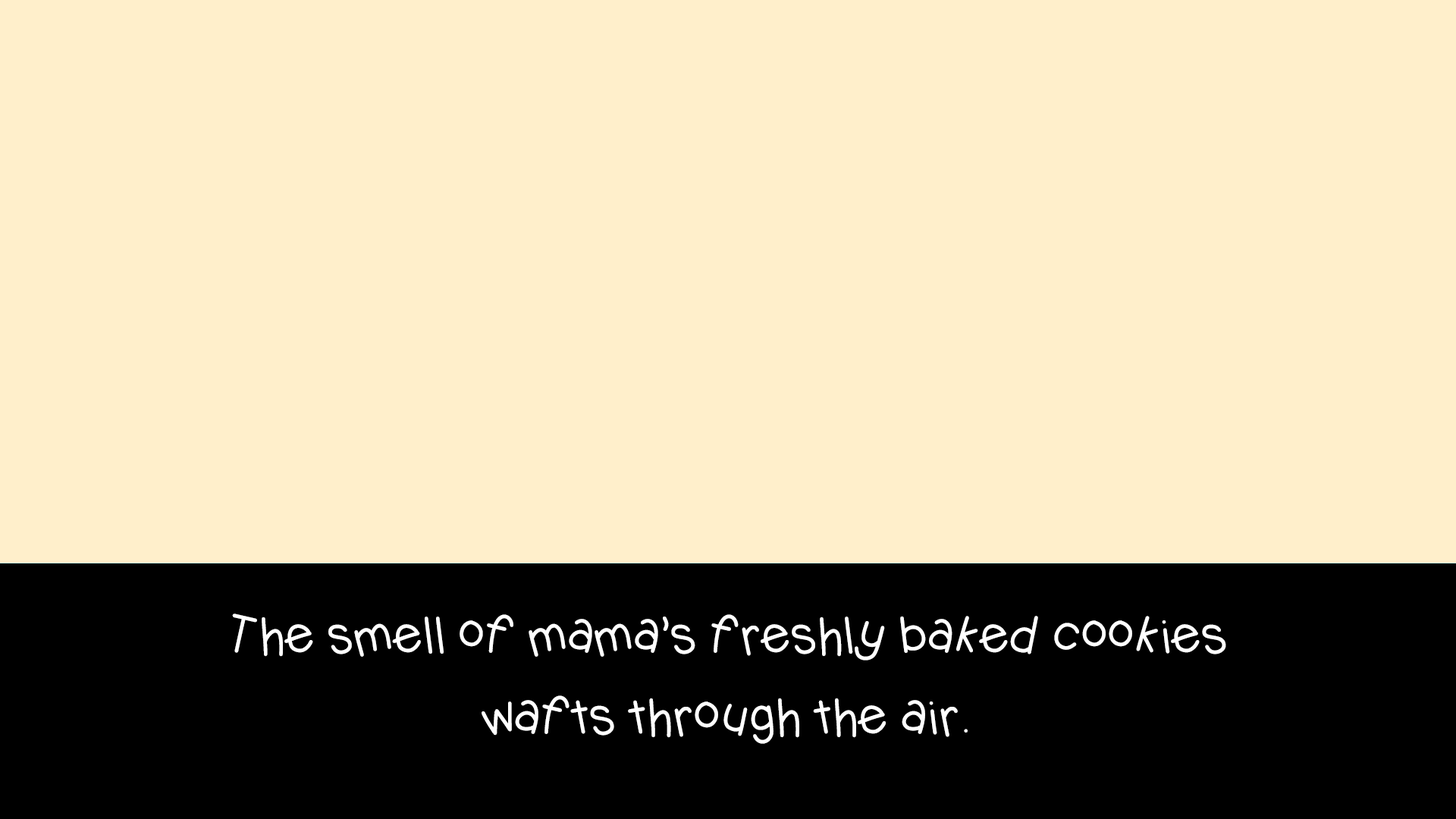
<style>
.page{position:relative;width:1456px;height:819px;background:#ffefcb}
.page>*{position:absolute;margin:0}
.t1{font:49.1px/81.1px "KBJellybean";letter-spacing:-0.04em;color:#ffffff}
</style>
<div class="page">
<p class="t1" style="left:232px;top:613px;width:994px;height:131px;text-align:center">The smell of mama’s freshly baked cookies <br>wafts through the air.</p>
</div>
